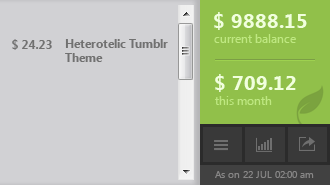
<style>
.page{position:relative;width:330px;height:185px;background:#d1d1d4}
.page>*{position:absolute;margin:0}
.t1{font:20px "SegoeUI-Bold";color:#f1ffdd}
.t2{font:12px "SegoeUI-Bold";color:#717171}
.t3{font:12px "SegoeUI";color:#bfe881}
.t4{font:10px "SegoeUI";color:#878686}
</style>
<div class="page">
<p class="t1" style="left:214px;top:12px;width:93px;height:18px">$ 9888.15</p>
<p class="t2" style="left:12px;top:39px;width:40px;height:11px">$ 24.23</p>
<p class="t2" style="left:65px;top:39px;width:103px;height:23px">Heterotelic Tumblr <br>Theme</p>
<p class="t3" style="left:214px;top:34px;width:82px;height:9px">current balance</p>
<p class="t1" style="left:215px;top:74px;width:81px;height:18px">$ 709.12</p>
<p class="t3" style="left:215px;top:96px;width:57px;height:9px">this month</p>
<p class="t4" style="left:215px;top:171px;width:99px;height:7px">As on 22 JUL 02:00 am</p>
</div>
